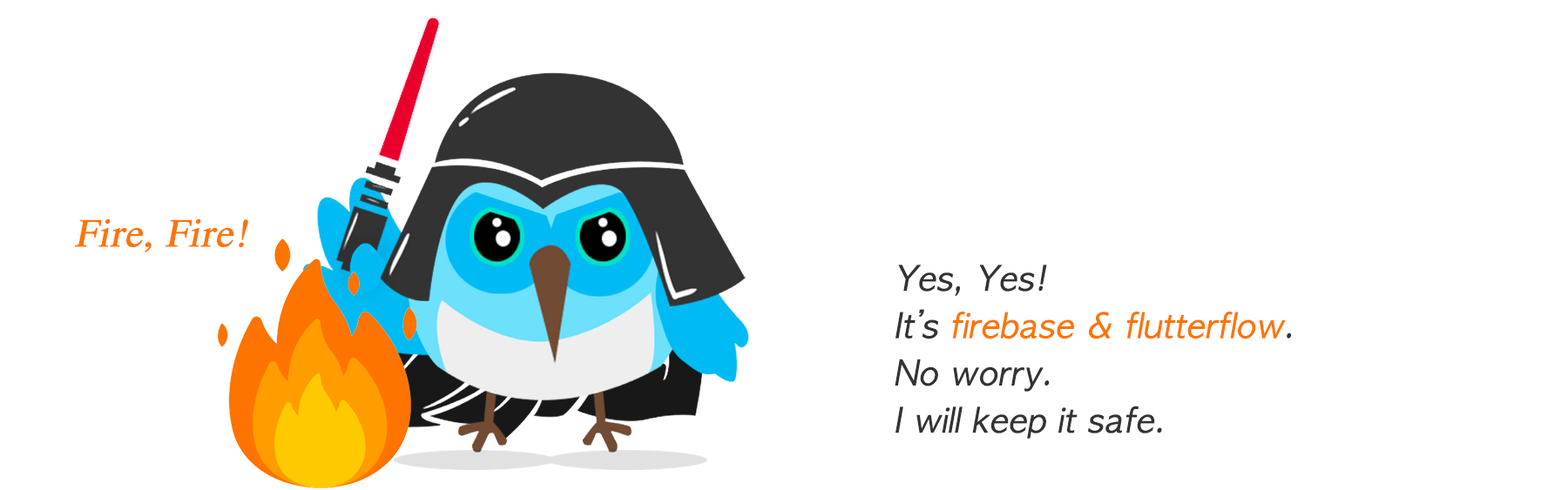
<style>
.page{position:relative;width:1568px;height:490px;background:#ffffff}
.page>*{position:absolute;margin:0}
.t1{font:39.7px "STIXGeneral-Regular";color:#ff7400;font-weight:bold;font-style:italic}
.t2{font:32.6px/47.4px "AppleGothic";color:#333333;font-weight:bold;font-style:italic}
.t3{font:32.6px/47.4px "AppleGothic";color:#fe7400;font-weight:bold;font-style:italic}
</style>
<div class="page">
<p class="t1" style="left:75px;top:219px;width:173px;height:34px">Fire, Fire!</p>
<p class="t2" style="left:895px;top:265px;width:397px;height:174px">Yes, Yes!<br>It’s <span class="t3">firebase &amp; flutterflow</span>.<br>No worry.<br>I will keep it safe.</p>
</div>
